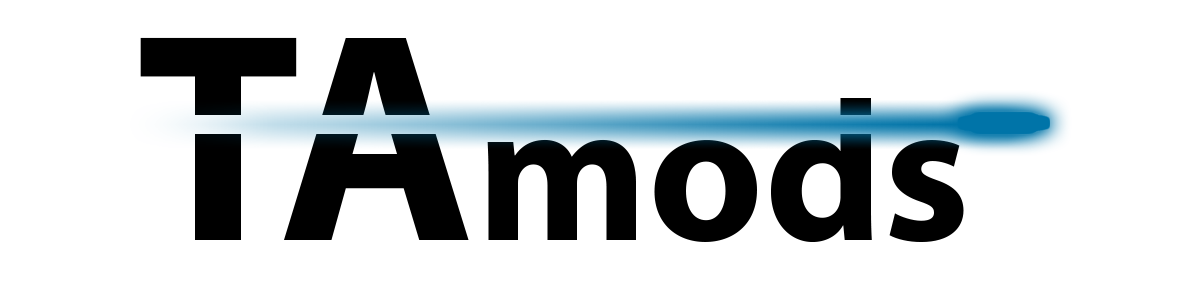
<style>
.page{position:relative;width:1200px;height:295px;background:#ffffff}
.page>*{position:absolute;margin:0}
.t1{font:200px "MyriadPro-Bold";color:#000000}
.t2{font:300px "MyriadPro-Bold";color:#000000}
</style>
<div class="page">
<p class="t1" style="left:140px;top:37px;width:824px;height:205px"><span class="t2">TA</span>mods</p>
</div>
